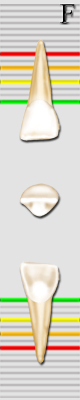
<style>
.page{position:relative;width:80px;height:400px;background:#e4e3e3}
.page>*{position:absolute;margin:0}
.t1{font:28.4px "TimesNewRomanPSMT";letter-spacing:0.005em;color:#000000}
</style>
<div class="page">
<p class="t1" style="left:60px;top:4px;width:15px;height:19px">F</p>
</div>
